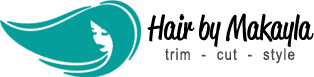
<style>
.page{position:relative;width:314px;height:77px;background:#ffffff}
.page>*{position:absolute;margin:0}
.t1{font:15.8px/20.8px "ArialNarrow";letter-spacing:0.08em;color:#494949}
.t2{font:33.3px/62.5px "ReklameScript-RegularDEMO";color:#000000}
</style>
<div class="page">
<p class="t1" style="left:147px;top:13px;width:167px;height:51px;text-align:center"><span class="t2">Hair by Makayla<br></span>trim  -  cut  -  style</p>
</div>
